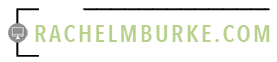
<style>
.page{position:relative;width:277px;height:62px;background:#ffffff}
.page>*{position:absolute;margin:0}
.t1{font:24px "AvenirNextCondensed-DemiBold";letter-spacing:0.1em;color:#b8d28d}
</style>
<div class="page">
<p class="t1" style="left:35px;top:25px;width:235px;height:17px">RACHELMBURKE.COM</p>
</div>
